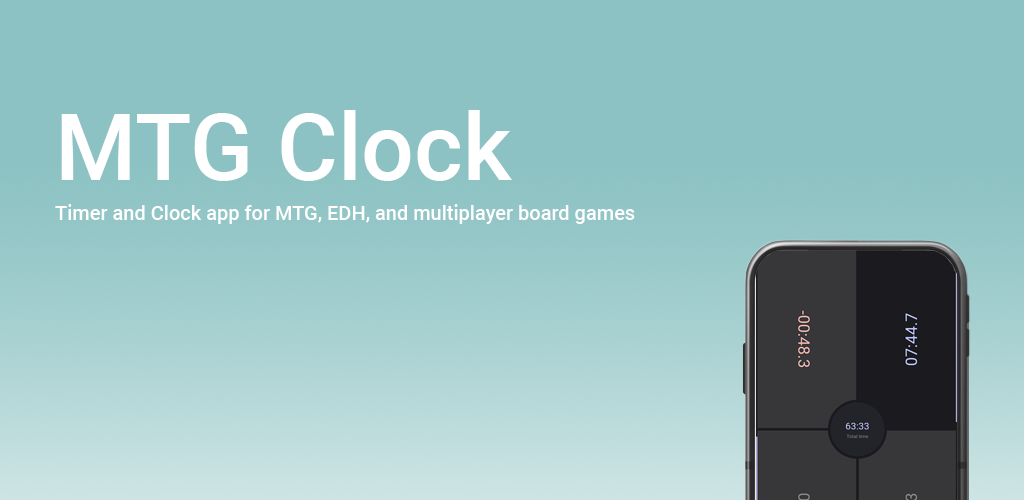
<style>
.page{position:relative;width:1024px;height:500px;background:#8cc2c3}
.page>*{position:absolute;margin:0}
.t1{font:93px "Roboto-Medium";color:#ffffff}
.t2{font:20px "Roboto-Medium";color:#ffffff}
</style>
<div class="page">
<p class="t1" style="left:61px;top:110px;width:451px;height:71px">MTG Clock</p>
<p class="t2" style="left:55px;top:204px;width:580px;height:20px">Timer and Clock app for MTG, EDH, and multiplayer board games</p>
</div>
